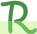
<style>
.page{position:relative;width:37px;height:34px;background:#ffffff}
.page>*{position:absolute;margin:0}
.t1{font:36px "KristenITC-Regular";color:#469046;font-weight:bold}
</style>
<div class="page">
<p class="t1" style="left:0px;top:0px;width:37px;height:34px">R</p>
</div>
